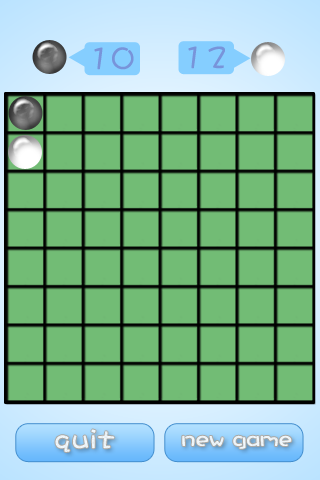
<style>
.page{position:relative;width:320px;height:480px;background:#72bc75}
.page>*{position:absolute;margin:0}
.t1{font:30px "DFCraftYu-W5-WING-RKSJ-H";color:#7894da;font-weight:bold}
.t2{font:30px "DFCraftYu-W5-WING-RKSJ-H";color:#edf4f8;font-weight:bold}
.t3{font:23.8px "DFCraftYu-W5-WING-RKSJ-H";color:#eef4f9;font-weight:bold}
</style>
<div class="page">
<p class="t1" style="left:94px;top:47px;width:40px;height:23px">10</p>
<p class="t1" style="left:188px;top:46px;width:37px;height:23px">12</p>
<p class="t2" style="left:55px;top:429px;width:60px;height:23px">quit</p>
<p class="t3" style="left:182px;top:435px;width:110px;height:14px">new game</p>
</div>
